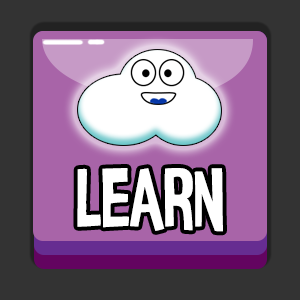
<style>
.page{position:relative;width:300px;height:300px;background:#333333}
.page>*{position:absolute;margin:0}
.t1{font:85.1px "InsideOut";color:#ffffff;scale:0.82 1}
</style>
<div class="page">
<p class="t1" style="left:77px;top:168px;width:146px;height:64px">learn</p>
</div>
